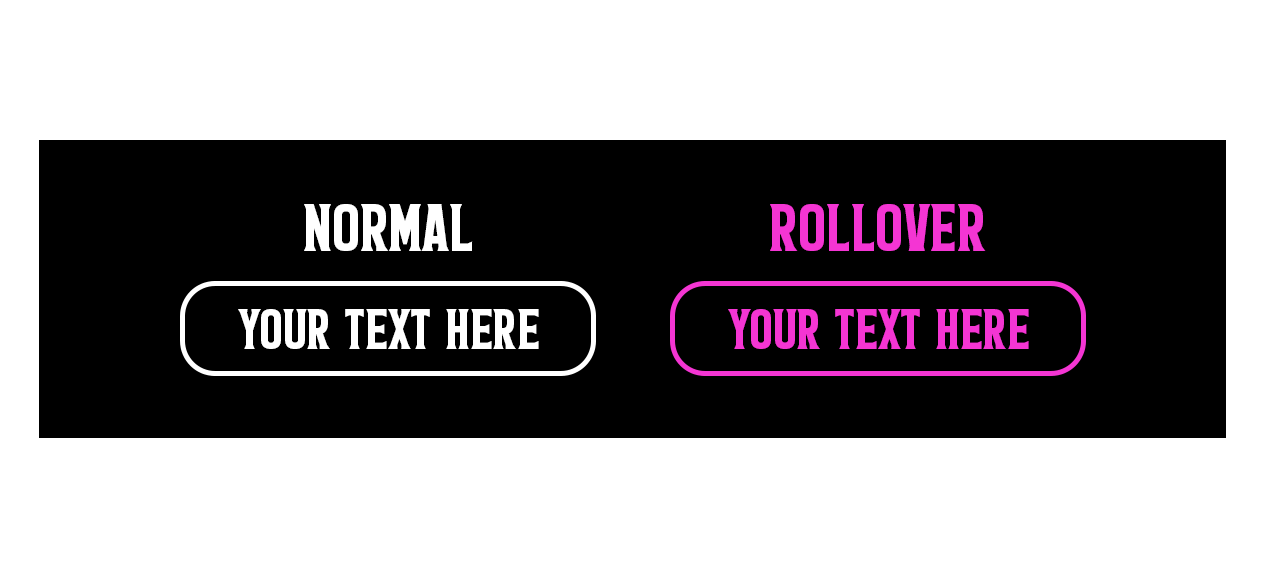
<style>
.page{position:relative;width:1264px;height:576px;background:#ffffff}
.page>*{position:absolute;margin:0}
.t1{font:74.9px "DoublePorter6";color:#ffffff}
.t2{font:74.9px "DoublePorter6";color:#f435d3}
.t3{font:64.1px "DoublePorter6";color:#ffffff}
.t4{font:64.1px "DoublePorter6";color:#f435d3}
</style>
<div class="page">
<p class="t1" style="left:304px;top:204px;width:169px;height:47px">NORMAL</p>
<p class="t2" style="left:770px;top:204px;width:216px;height:47px">ROLLOVER</p>
<p class="t3" style="left:238px;top:309px;width:301px;height:40px">YOUR TEXT HERE</p>
<p class="t4" style="left:728px;top:309px;width:301px;height:40px">YOUR TEXT HERE</p>
</div>
